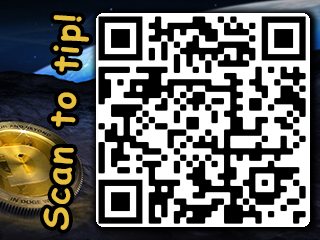
<style>
.page{position:relative;width:320px;height:240px;background:#ffffff}
.page>*{position:absolute;margin:0}
.t1{font:34.2px "ComicSansMS-Bold";letter-spacing:0.06em;color:#e7bf3e}
</style>
<div class="page">
<p class="t1" style="left:43px;top:15px;width:46px;height:215px;rotate:-86deg">Scan to tip!</p>
</div>
